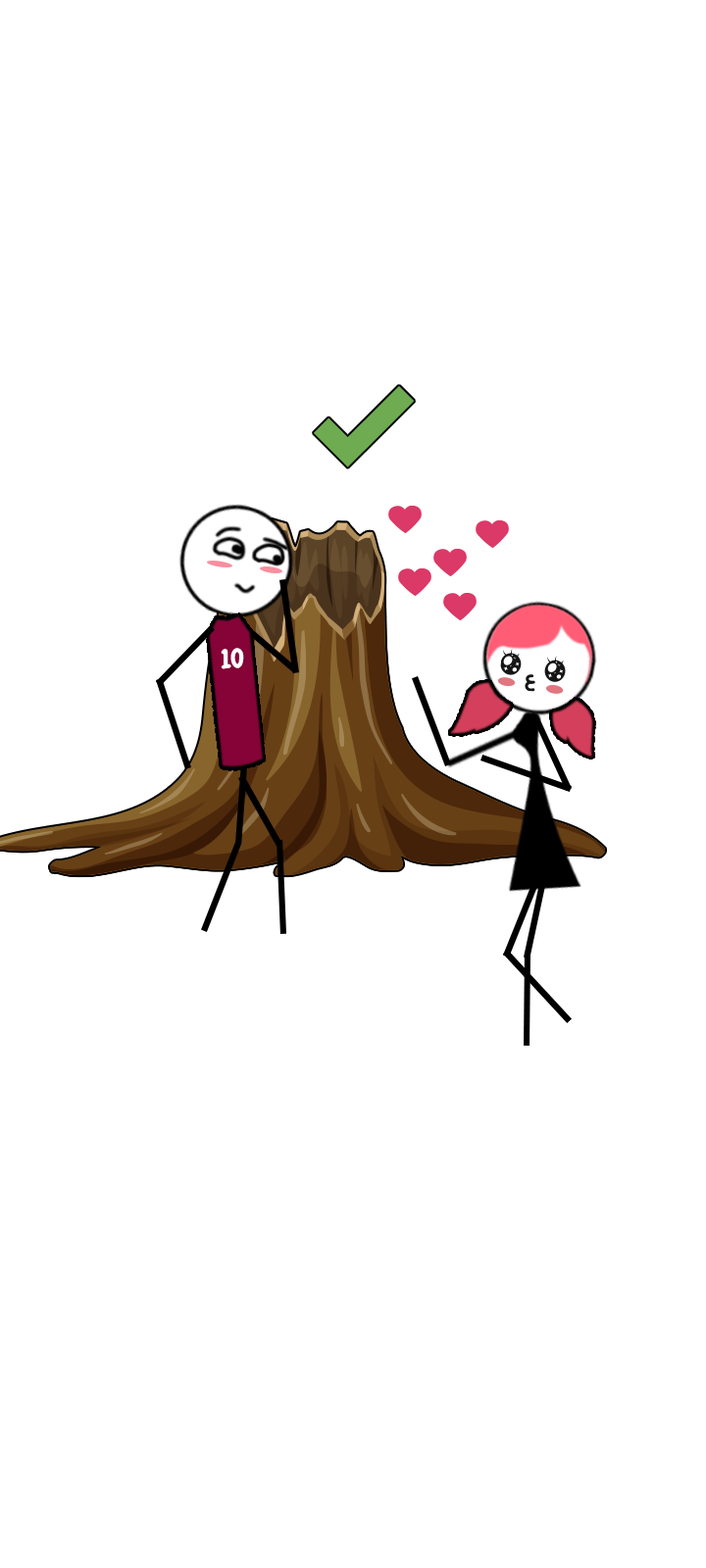
<style>
.page{position:relative;width:706px;height:1568px;background:#ffffff}
.page>*{position:absolute;margin:0}
.t1{font:28.6px "PapernotesBold";color:#ffffff}
</style>
<div class="page">
<p class="t1" style="left:220px;top:648px;width:24px;height:21px;rotate:-3deg">10</p>
</div>
